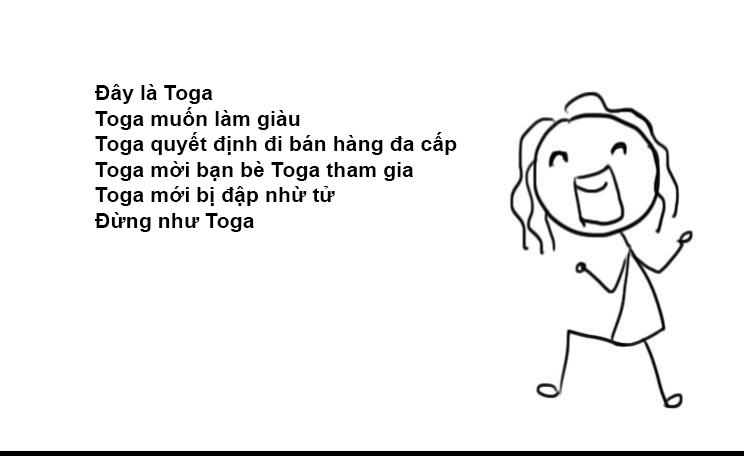
<style>
.page{position:relative;width:744px;height:456px;background:#ffffff}
.page>*{position:absolute;margin:0}
.t1{font:21.3px "Arial-BoldMT";color:#000000}
</style>
<div class="page">
<p class="t1" style="left:95px;top:84px;width:362px;height:148px">Đây là Toga<br>Toga muốn làm giàu<br>Toga quyết định đi bán hàng đa cấp<br>Toga mời bạn bè Toga tham gia<br>Toga mới bị đập nhừ tử<br>Đừng như Toga</p>
</div>
